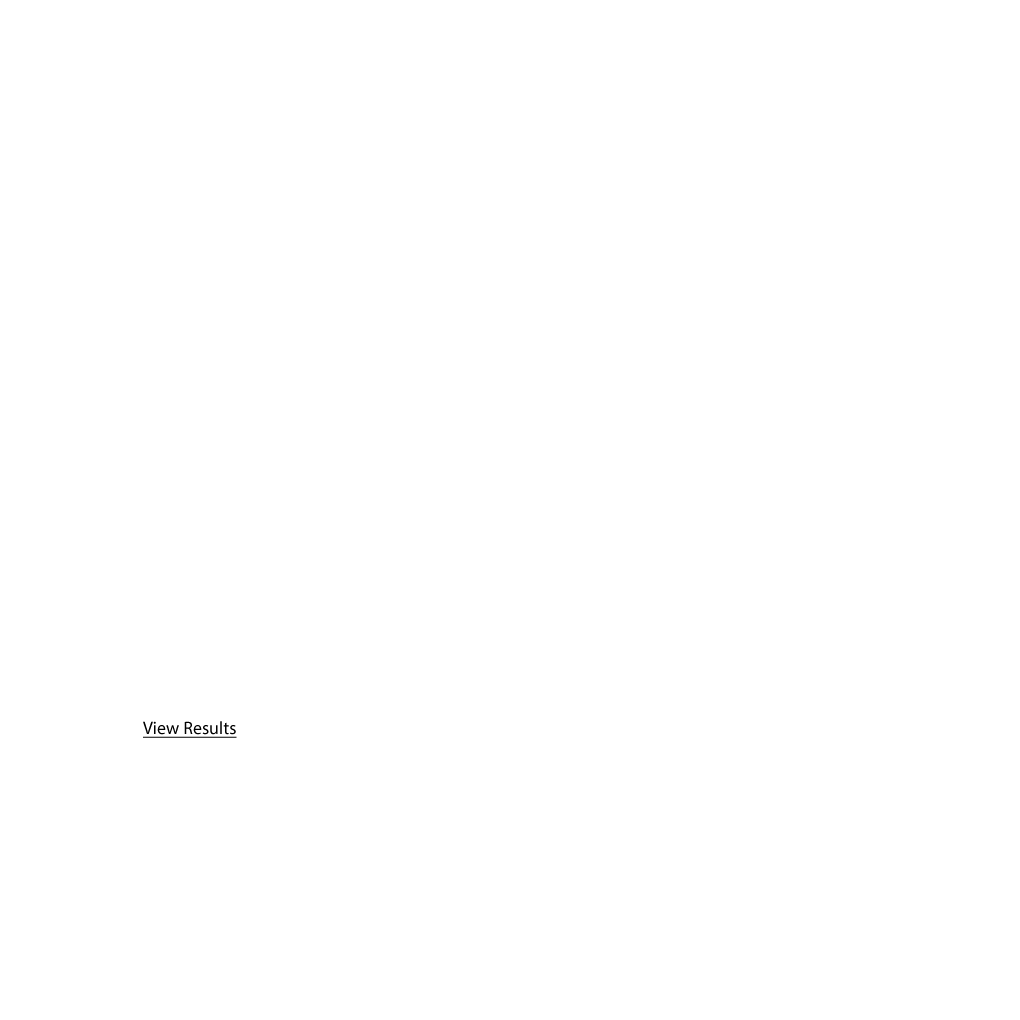
<style>
.page{position:relative;width:1020px;height:1020px;background:#ffffff}
.page>*{position:absolute;margin:0}
.t1{font:18px "MyriadPro-Regular";color:#000000;text-decoration:underline}
</style>
<div class="page">
<p class="t1" style="left:143px;top:721px;width:94px;height:17px">View Results</p>
</div>
